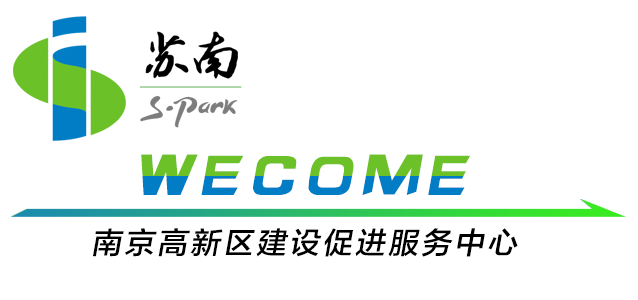
<style>
.page{position:relative;width:638px;height:300px;background:#ffffff}
.page>*{position:absolute;margin:0}
.t1{font:60px "HYk2gj";letter-spacing:0.1em;font-style:italic}
.t2{font:30px "FZLTZHK--GBK1-0";letter-spacing:0.1em;color:#000000;font-style:italic}
</style>
<div class="page">
<p class="t1" style="left:141px;top:154px;width:329px;height:41px">WECOME</p>
<p class="t2" style="left:93px;top:228px;width:425px;height:29px">南京高新区建设促进服务中心</p>
</div>
